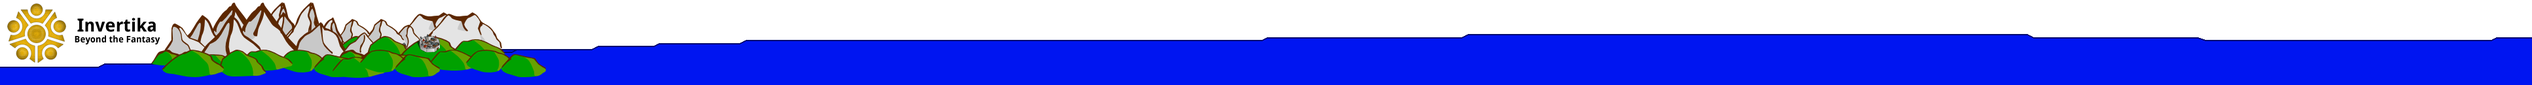
<style>
.page{position:relative;width:2532px;height:85px;background:#0015f1}
.page>*{position:absolute;margin:0}
.t1{font:9px "DroidSans-Bold";color:#000000}
.t2{font:18px "DroidSans-Bold";color:#000000}
</style>
<div class="page">
<p class="t1" style="left:75px;top:18px;width:85px;height:27px;text-align:center"><span class="t2">Invertika<br></span>Beyond the Fantasy</p>
</div>
